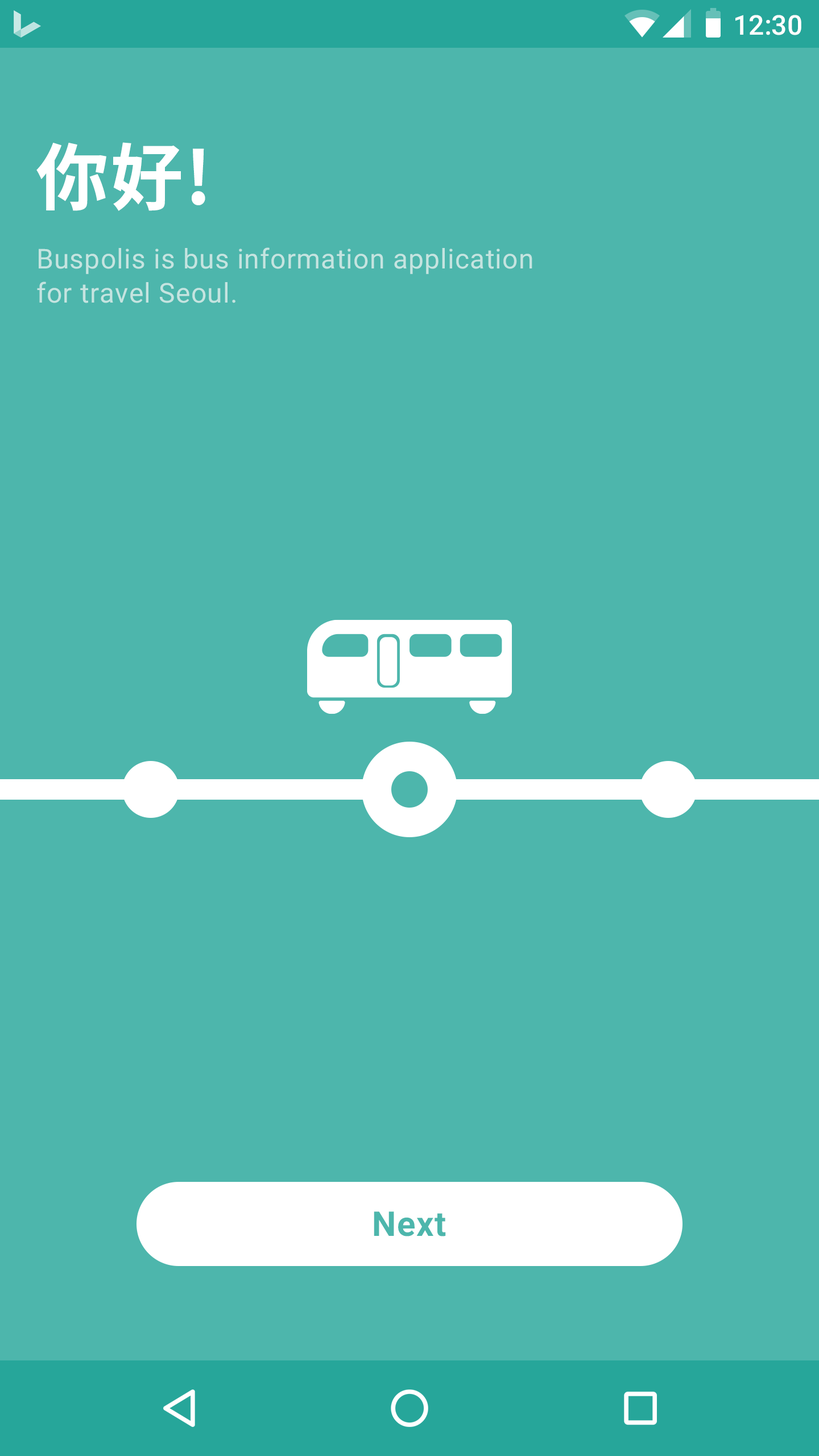
<style>
.page{position:relative;width:819px;height:1456px;background:#4db6ac}
.page>*{position:absolute;margin:0}
.t1{font:27.3px "Roboto-Medium";color:#ffffff}
.t2{font:72.8px "NotoSansCJKkr-Bold";letter-spacing:0.025em;color:#ffffff}
.t3{font:27.3px/34.1px "Roboto-Regular";letter-spacing:0.025em;color:#c5e4e0}
.t4{font:34.1px "Roboto-Bold";letter-spacing:0.025em;color:#4db6ac}
</style>
<div class="page">
<p class="t1" style="left:735px;top:15px;width:66px;height:20px">12:30</p>
<p class="t2" style="left:36px;top:142px;width:169px;height:69px">你好!</p>
<p class="t3" style="left:37px;top:247px;width:495px;height:56px">Buspolis is bus information application <br>for travel Seoul.</p>
<p class="t4" style="left:374px;top:1211px;width:72px;height:25px">Next</p>
</div>
